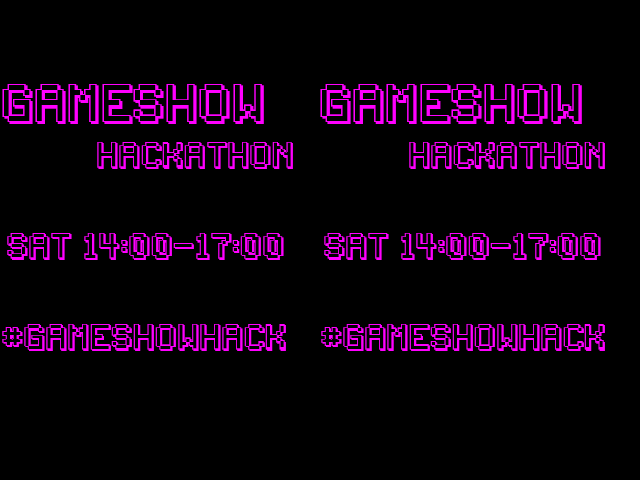
<style>
.page{position:relative;width:640px;height:480px;background:#000000}
.page>*{position:absolute;margin:0}
.t1{font:36px "Backto1982";color:#ff00ff}
.t2{font:24px "Backto1982";color:#ff00ff}
</style>
<div class="page">
<p class="t1" style="left:2px;top:84px;width:262px;height:40px">gameshow</p>
<p class="t1" style="left:320px;top:84px;width:262px;height:40px">gameshow</p>
<p class="t2" style="left:97px;top:142px;width:196px;height:27px">hackathon</p>
<p class="t2" style="left:409px;top:142px;width:196px;height:27px">hackathon</p>
<p class="t2" style="left:7px;top:233px;width:277px;height:27px">sat 14:00-17:00</p>
<p class="t2" style="left:324px;top:233px;width:277px;height:27px">sat 14:00-17:00</p>
<p class="t2" style="left:2px;top:324px;width:284px;height:27px">#gameshowhack</p>
<p class="t2" style="left:321px;top:324px;width:284px;height:27px">#gameshowhack</p>
</div>
